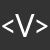
<style>
.page{position:relative;width:50px;height:50px;background:#333333}
.page>*{position:absolute;margin:0}
.t1{font:32px "Lato-Regular";letter-spacing:-0.06em;color:#ffffff;scale:0.9 1}
</style>
<div class="page">
<p class="t1" style="left:2px;top:14px;width:46px;height:23px">&lt;V&gt;</p>
</div>
